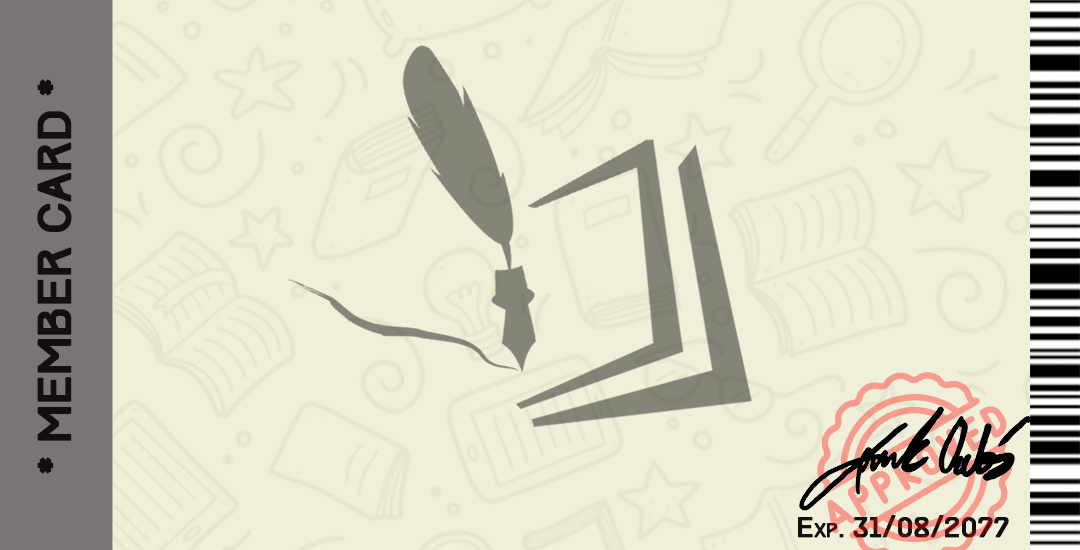
<style>
.page{position:relative;width:1080px;height:550px;background:#f0f0da}
.page>*{position:absolute;margin:0}
.t1{font:41.7px "Track-Regular";color:#110f0f;font-weight:bold}
.t2{font:25px "Track-Regular";color:#110f0f;font-variant:small-caps;font-weight:bold}
</style>
<div class="page">
<p class="t1" style="left:37px;top:79px;width:35px;height:395px;rotate:-90deg">* MEMBER CARD *</p>
<p class="t2" style="left:798px;top:515px;width:211px;height:23px">Exp. 31/08/2077</p>
</div>
